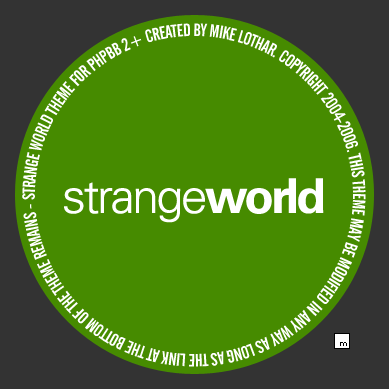
<style>
.page{position:relative;width:389px;height:389px;background:#468b00}
.page>*{position:absolute;margin:0}
.t1{font:17.9px "AlternateGothicNo2BT-Regular";letter-spacing:-0.033em;color:#ffffff}
.t2{font:48px "Univers-Light";letter-spacing:-0.05em;color:#ffffff}
.t3{font:48px "Univers-Bold";letter-spacing:-0.05em;color:#ffffff}
</style>
<div class="page">
<p class="t1" style="left:22px;top:23px;width:344px;height:344px">STRANGE WORLD THEME FOR PHPBB 2+ CREATED BY MIKE LOTHAR. COPYRIGHT 2004-2006. THIS THEME MAY BE MODIFIED IN ANY WAY AS LONG AS THE LINK AT THE BOTTOM OF THE THEME REMAINS -</p>
<p class="t2" style="left:64px;top:178px;width:260px;height:45px">strange<span class="t3">world</span></p>
</div>
